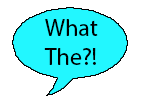
<style>
.page{position:relative;width:150px;height:100px;background:#ffffff}
.page>*{position:absolute;margin:0}
.t1{font:24px "MyriadPro-Regular";color:#000000}
</style>
<div class="page">
<p class="t1" style="left:44px;top:19px;width:54px;height:46px">What<br>The?!</p>
</div>
